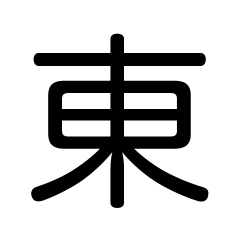
<style>
.page{position:relative;width:240px;height:240px;background:#ffffff}
.page>*{position:absolute;margin:0}
.t1{font:187.4px "HiraMaruPro-W4";color:#000000}
</style>
<div class="page">
<p class="t1" style="left:31px;top:33px;width:178px;height:175px">東</p>
</div>
